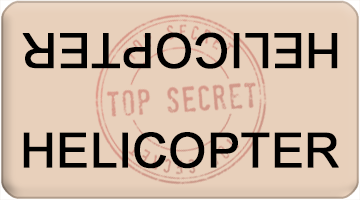
<style>
.page{position:relative;width:360px;height:200px;background:#e8d0bb}
.page>*{position:absolute;margin:0}
.t1{font:48px "ArialMT";color:#000000;font-weight:bold}
</style>
<div class="page">
<p class="t1" style="left:22px;top:32px;width:316px;height:37px;rotate:180deg">HELICOPTER</p>
<p class="t1" style="left:23px;top:132px;width:316px;height:37px">HELICOPTER</p>
</div>
